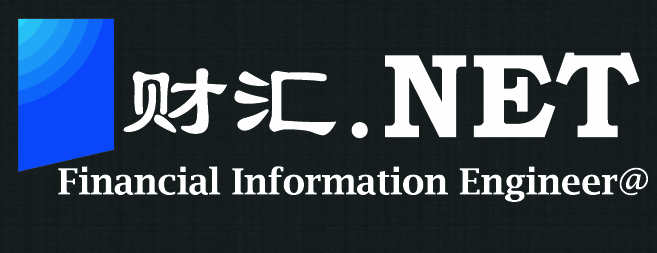
<style>
.page{position:relative;width:657px;height:253px}
.page>*{position:absolute;margin:0}
.t1{font:120px "BookmanOldStyle-Bold";color:#fefefe}
.t2{font:110px "LiSu";color:#fefefe}
.t3{font:130px "BookmanOldStyle";color:#fefefe}
.t4{font:36px "LucidaBright-Demi";color:#ffffff}
</style>
<div class="page">
<p class="t1" style="left:123px;top:52px;width:517px;height:87px"><span class="t2">财汇</span><span class="t3">.</span>NET</p>
<p class="t4" style="left:58px;top:166px;width:590px;height:36px">Financial Information Engineer@</p>
</div>
